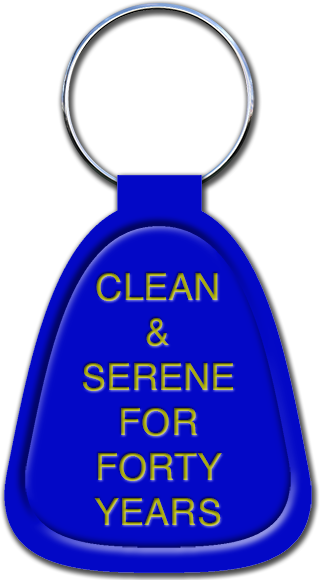
<style>
.page{position:relative;width:320px;height:580px;background:#ffffff}
.page>*{position:absolute;margin:0}
.t1{font:37.5px "Helvetica"}
</style>
<div class="page">
<p class="t1" style="left:82px;top:273px;width:151px;height:253px;text-align:center">CLEAN<br>&amp;<br>SERENE<br>FOR<br>FORTY<br>YEARS</p>
</div>
